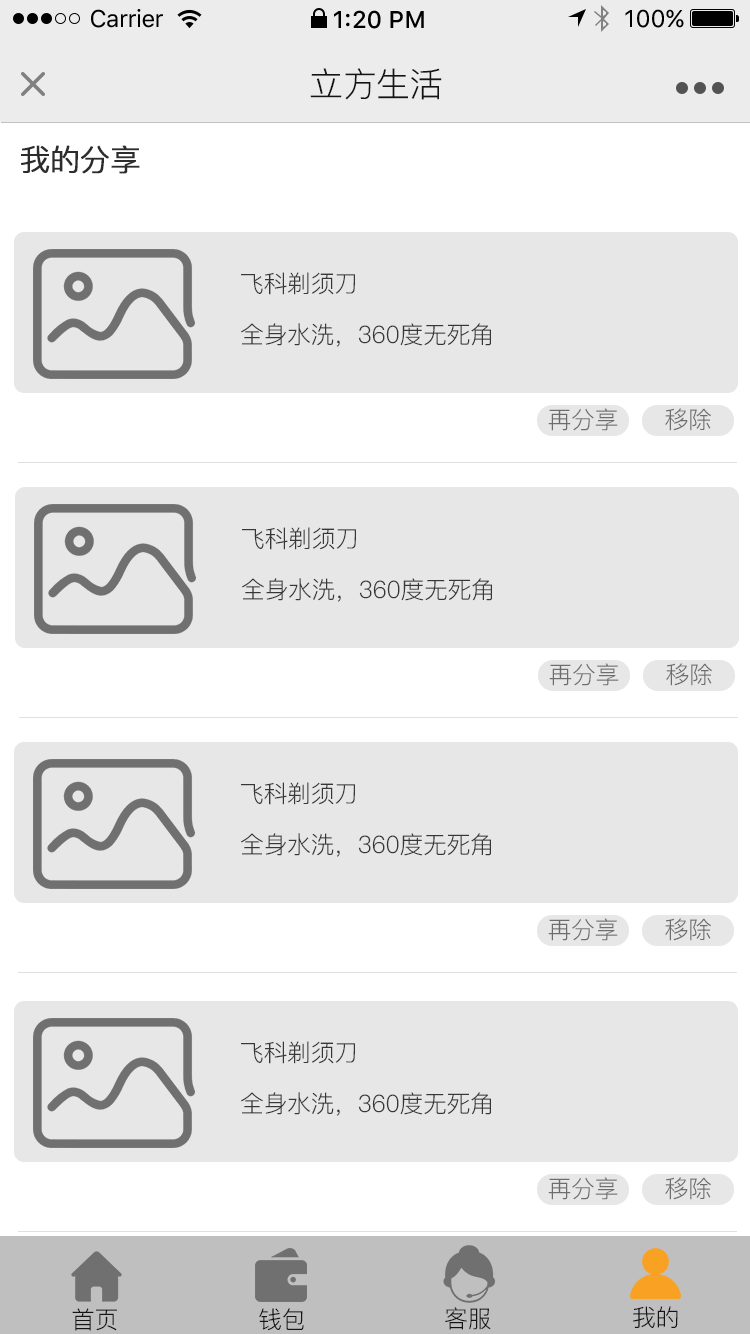
<style>
.page{position:relative;width:750px;height:1334px;background:#e7e7e7}
.page>*{position:absolute;margin:0}
.t1{font:24px "SFUIText-Regular";letter-spacing:-0.025em;color:#000000}
.t2{font:24px "SFUIText-Medium";color:#000000}
.t3{font:24px "SFUIText-Regular";color:#000000}
.t4{font:34px "PingFang-SC-Regular";letter-spacing:-0.02em;color:#141414}
.t5{font:30px "PingFang-SC-Regular";letter-spacing:-0.024em;color:#2c2c2c;font-weight:bold}
.t6{font:24px "PingFang-SC-Regular";letter-spacing:-0.02em;color:#373737}
.t7{font:24px "PingFang-SC-Regular";letter-spacing:-0.024em;color:#6d6d6d}
.t8{font:24px "PingFang-SC-Regular";letter-spacing:-0.02em;color:#141414}
</style>
<div class="page">
<p class="t1" style="left:91px;top:9px;width:72px;height:19px">Carrier</p>
<p class="t2" style="left:334px;top:10px;width:90px;height:19px">1:20 PM</p>
<p class="t3" style="left:625px;top:9px;width:59px;height:19px">100%</p>
<p class="t4" style="left:310px;top:68px;width:132px;height:32px">立方生活</p>
<p class="t5" style="left:21px;top:145px;width:119px;height:29px">我的分享</p>
<p class="t6" style="left:241px;top:272px;width:114px;height:23px">飞科剃须刀</p>
<p class="t6" style="left:241px;top:323px;width:250px;height:24px">全身水洗，360度无死角</p>
<p class="t7" style="left:548px;top:408px;width:70px;height:23px">再分享</p>
<p class="t7" style="left:665px;top:408px;width:46px;height:23px">移除</p>
<p class="t6" style="left:242px;top:527px;width:114px;height:23px">飞科剃须刀</p>
<p class="t6" style="left:242px;top:578px;width:250px;height:24px">全身水洗，360度无死角</p>
<p class="t7" style="left:549px;top:663px;width:70px;height:23px">再分享</p>
<p class="t7" style="left:666px;top:663px;width:46px;height:23px">移除</p>
<p class="t6" style="left:241px;top:782px;width:114px;height:23px">飞科剃须刀</p>
<p class="t6" style="left:241px;top:833px;width:250px;height:24px">全身水洗，360度无死角</p>
<p class="t7" style="left:548px;top:918px;width:70px;height:23px">再分享</p>
<p class="t7" style="left:665px;top:918px;width:46px;height:23px">移除</p>
<p class="t6" style="left:241px;top:1041px;width:114px;height:23px">飞科剃须刀</p>
<p class="t6" style="left:241px;top:1092px;width:250px;height:24px">全身水洗，360度无死角</p>
<p class="t7" style="left:548px;top:1177px;width:70px;height:23px">再分享</p>
<p class="t7" style="left:665px;top:1177px;width:46px;height:23px">移除</p>
<p class="t8" style="left:72px;top:1308px;width:45px;height:23px">首页</p>
<p class="t8" style="left:259px;top:1308px;width:45px;height:23px">钱包</p>
<p class="t8" style="left:445px;top:1307px;width:46px;height:23px">客服</p>
<p class="t8" style="left:633px;top:1306px;width:45px;height:22px">我的</p>
</div>
